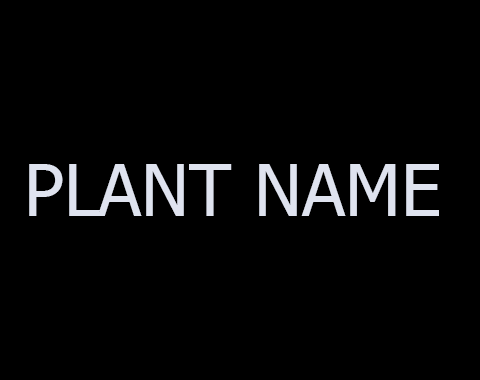
<style>
.page{position:relative;width:480px;height:380px;background:#000000}
.page>*{position:absolute;margin:0}
.t1{font:72px "Tahoma";color:#dfe3ef}
</style>
<div class="page">
<p class="t1" style="left:29px;top:164px;width:410px;height:52px">PLANT NAME</p>
</div>
